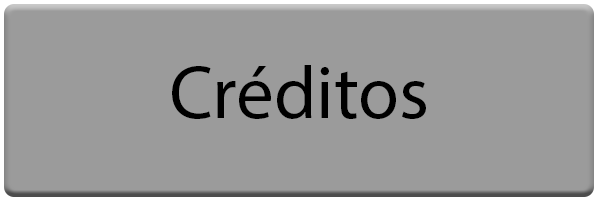
<style>
.page{position:relative;width:600px;height:200px;background:#9b9b9b}
.page>*{position:absolute;margin:0}
.t1{font:75px "MyriadPro-Regular";color:#000000}
</style>
<div class="page">
<p class="t1" style="left:172px;top:65px;width:254px;height:54px">Créditos</p>
</div>
